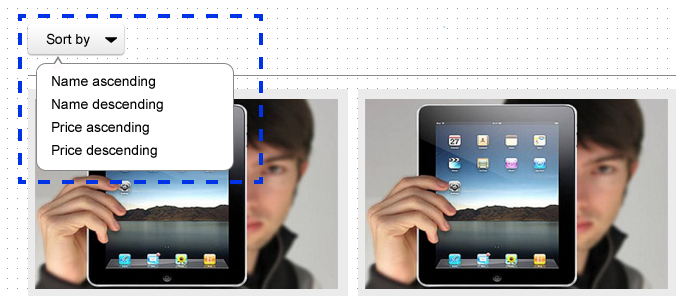
<style>
.page{position:relative;width:676px;height:296px;background:#ffffff}
.page>*{position:absolute;margin:0}
.t1{font:13.9px "ArialMT";letter-spacing:-0.01em;color:#000000}
.t2{font:13.9px/22.9px "ArialMT";letter-spacing:-0.01em;color:#000000}
</style>
<div class="page">
<p class="t1" style="left:46px;top:33px;width:44px;height:14px">Sort by</p>
<p class="t2" style="left:52px;top:76px;width:111px;height:82px">Name ascending<br>Name descending<br>Price ascending<br>Price descending</p>
</div>
